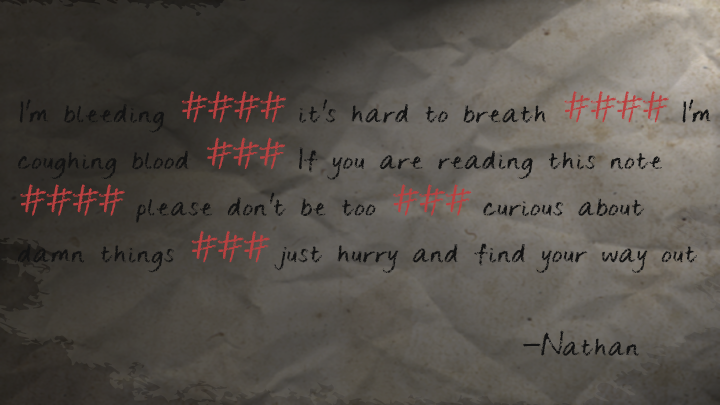
<style>
.page{position:relative;width:720px;height:405px}
.page>*{position:absolute;margin:0}
.t1{font:28px/46.6px "ChangeTomorrowToday";color:#131313;font-style:italic}
.t2{font:28px/46.6px "ChangeTomorrowToday";color:#b94040;font-style:italic}
</style>
<div class="page">
<p class="t1" style="left:17px;top:91px;width:694px;height:265px">I'm bleeding <span class="t2">####</span> it's hard to breath <span class="t2">####</span> I'm <br>coughing blood <span class="t2">###</span> If you are reading this note <br><span class="t2">####</span> please don't be too <span class="t2">###</span> curious about <br>damn things <span class="t2">###</span> just hurry and find your way out<br><br>              -Nathan</p>
</div>
